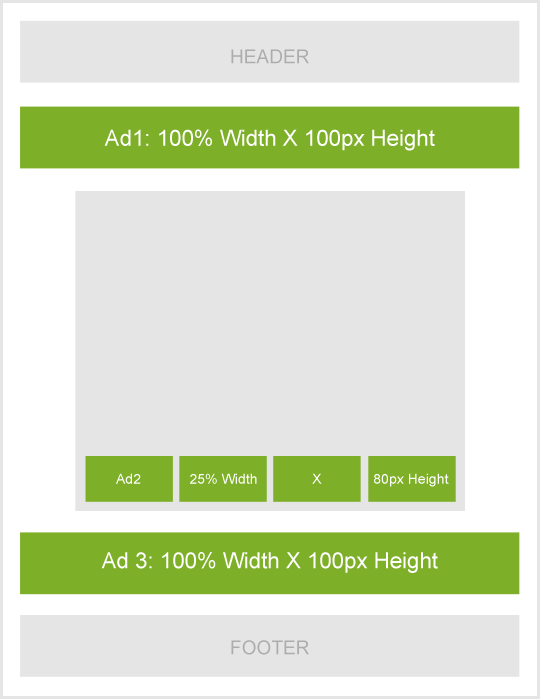
<style>
.page{position:relative;width:540px;height:699px;background:#e5e5e5}
.page>*{position:absolute;margin:0}
.t1{font:19.1px "ArialMT";color:#acacac}
.t2{font:22.2px "ArialMT";color:#ffffff}
.t3{font:14.1px "ArialMT";color:#ffffff}
</style>
<div class="page">
<p class="t1" style="left:231px;top:49px;width:78px;height:15px">HEADER</p>
<p class="t2" style="left:104px;top:129px;width:331px;height:22px">Ad1: 100% Width X 100px Height</p>
<p class="t3" style="left:116px;top:473px;width:25px;height:11px">Ad2</p>
<p class="t3" style="left:190px;top:473px;width:67px;height:11px">25% Width</p>
<p class="t3" style="left:312px;top:473px;width:10px;height:11px">X</p>
<p class="t3" style="left:374px;top:473px;width:75px;height:14px">80px Height</p>
<p class="t2" style="left:101px;top:552px;width:337px;height:21px">Ad 3: 100% Width X 100px Height</p>
<p class="t1" style="left:231px;top:640px;width:78px;height:15px">FOOTER</p>
</div>
